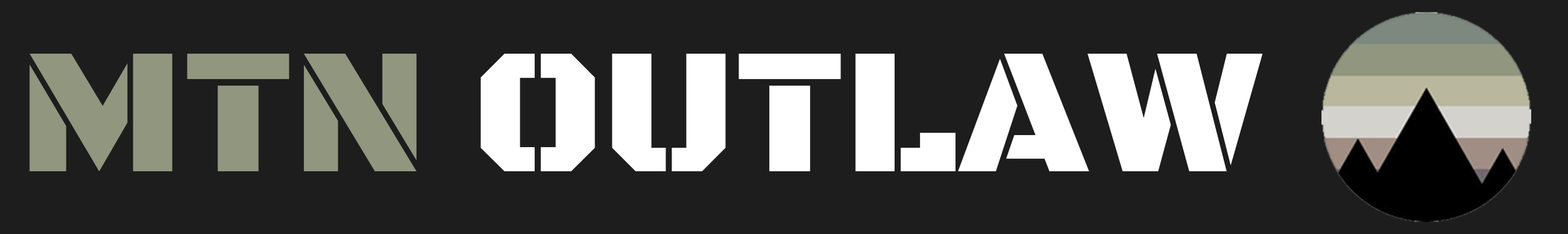
<style>
.page{position:relative;width:1568px;height:234px;background:#1d1d1d}
.page>*{position:absolute;margin:0}
.t1{font:180.9px "BlackOpsOne-Regular";color:#ffffff}
.t2{font:180.9px "BlackOpsOne-Regular";color:#91967f}
</style>
<div class="page">
<p class="t1" style="left:30px;top:54px;width:1233px;height:117px"><span class="t2">MTN </span>OUTLAW</p>
</div>
